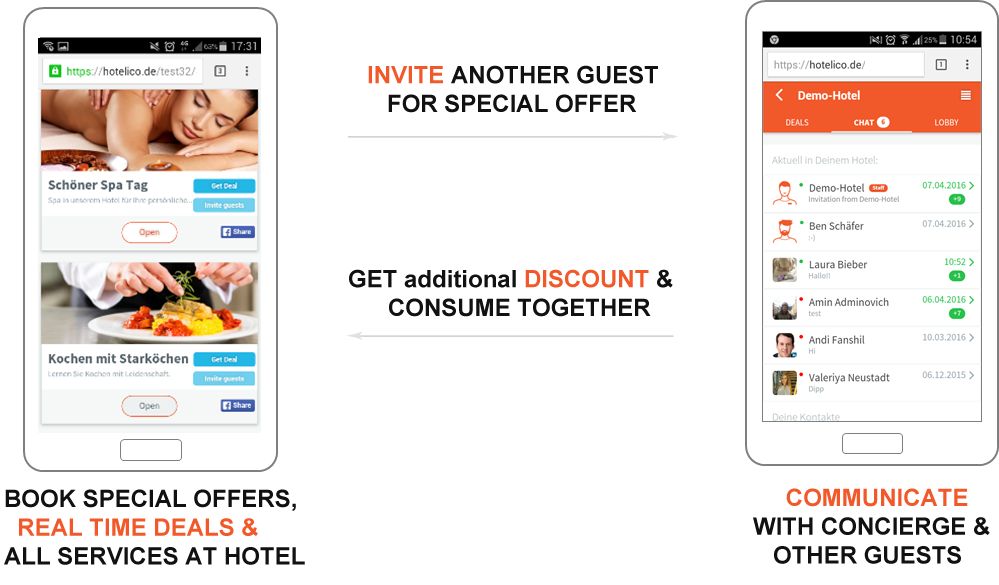
<style>
.page{position:relative;width:999px;height:585px;background:#ffffff}
.page>*{position:absolute;margin:0}
.t1{font:24px "Arial-BoldMT";color:#111111}
.t2{font:24px "Arial-BoldMT";color:#f1592a}
.t3{font:24px "Verdana-Bold";color:#111111}
.t4{font:24px "Verdana-Bold";color:#f1592a}
</style>
<div class="page">
<p class="t1" style="left:368px;top:65px;width:290px;height:48px"><span class="t2">INVITE </span>ANOTHER GUEST <br>   FOR SPECIAL OFFER</p>
<p class="t1" style="left:349px;top:269px;width:324px;height:48px">GET additional <span class="t2">DISCOUNT </span>&amp;     <br>      CONSUME TOGETHER <br><span class="t3">   FOR SPECIAL OFFER</span></p>
<p class="t1" style="left:4px;top:489px;width:301px;height:76px">BOOK SPECIAL OFFERS,<br><span class="t2">  REAL TIME DEALS &amp;</span> <br>ALL SERVICES AT HOTEL</p>
<p class="t1" style="left:753px;top:488px;width:237px;height:76px"><span class="t4">    </span><span class="t2">COMMUNICATE<br></span>WITH CONCIERGE &amp;<br>   OTHER GUESTS</p>
</div>
